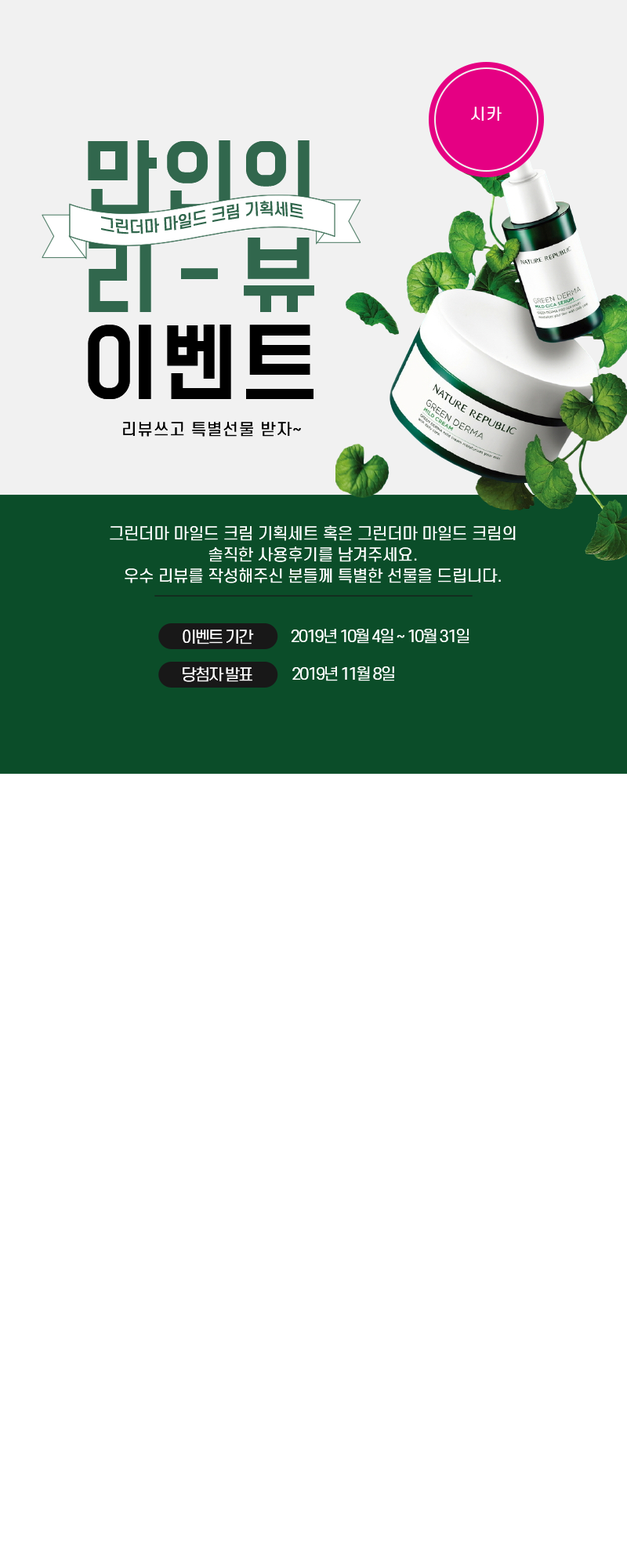
<style>
.page{position:relative;width:627px;height:1568px;background:#ffffff}
.page>*{position:absolute;margin:0}
.t1{font:15.7px "S-CoreDream-4Regular";letter-spacing:0.06em;color:#ffffff}
.t2{font:78.4px "BMDoHyeon";letter-spacing:0.05em;color:#31674d}
.t3{font:15.7px "S-CoreDream-5Medium";letter-spacing:-0.02em;color:#31674d}
.t4{font:78.4px "BMDoHyeon";letter-spacing:0.24em;color:#31674d}
.t5{font:78.4px "BMDoHyeon";letter-spacing:0.06em;color:#000000}
.t6{font:15.7px "S-CoreDream-4Regular";letter-spacing:0.06em;color:#000000}
.t7{font:15.7px/21.2px "S-CoreDream-4Regular";color:#ffffff}
.t8{font:15.7px "S-CoreDream-4Regular";letter-spacing:-0.1em;color:#ffffff}
</style>
<div class="page">
<p class="t1" style="left:471px;top:107px;width:31px;height:14px">시카</p>
<p class="t2" style="left:88px;top:140px;width:222px;height:75px">만인의</p>
<p class="t3" style="left:101px;top:201px;width:202px;height:33px;rotate:-3deg">그린더마 마일드 크림 기획세트</p>
<p class="t4" style="left:89px;top:238px;width:225px;height:74px">리-뷰</p>
<p class="t5" style="left:88px;top:325px;width:226px;height:74px">이벤트</p>
<p class="t6" style="left:123px;top:422px;width:178px;height:15px">리뷰쓰고 특별선물 받자~</p>
<p class="t7" style="left:110px;top:525px;width:406px;height:58px;text-align:center">그린더마 마일드 크림 기획세트 혹은 그린더마 마일드 크림의<br>솔직한 사용후기를 남겨주세요.<br>우수 리뷰를 작성해주신 분들께 특별한 선물을 드립니다.</p>
<p class="t8" style="left:183px;top:630px;width:71px;height:14px">이벤트 기간</p>
<p class="t8" style="left:291px;top:629px;width:179px;height:15px">2019년 10월 4일 ~ 10월 31일</p>
<p class="t8" style="left:183px;top:666px;width:69px;height:16px">당첨자 발표</p>
<p class="t8" style="left:292px;top:666px;width:102px;height:15px">2019년 11월 8일</p>
</div>
